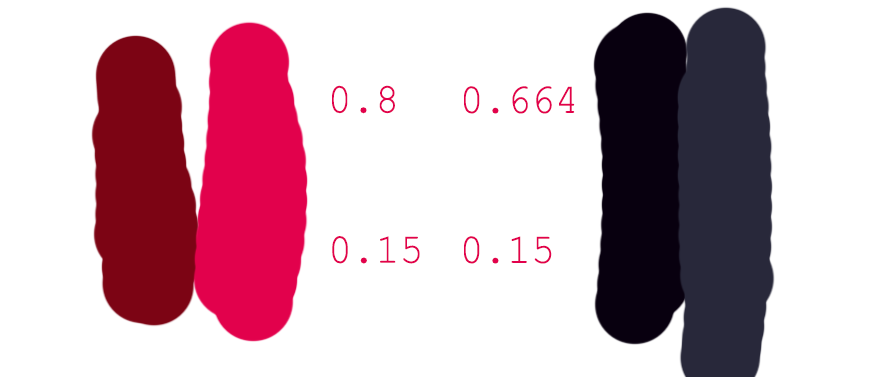
<style>
.page{position:relative;width:883px;height:377px;background:#ffffff}
.page>*{position:absolute;margin:0}
.t1{font:42.2px "CourierNewPSMT";letter-spacing:-0.006em;color:#e2014c;scale:0.95 1}
</style>
<div class="page">
<p class="t1" style="left:332px;top:85px;width:63px;height:29px">0.8</p>
<p class="t1" style="left:464px;top:86px;width:111px;height:28px">0.664</p>
<p class="t1" style="left:332px;top:236px;width:88px;height:28px">0.15</p>
<p class="t1" style="left:464px;top:236px;width:88px;height:28px">0.15</p>
</div>
